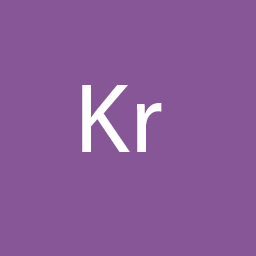
<style>
.page{position:relative;width:256px;height:256px;background:#865696}
.page>*{position:absolute;margin:0}
.t1{font:100px "MyriadPro-Regular";color:#ffffff}
</style>
<div class="page">
<p class="t1" style="left:82px;top:85px;width:80px;height:67px">Kr</p>
</div>
